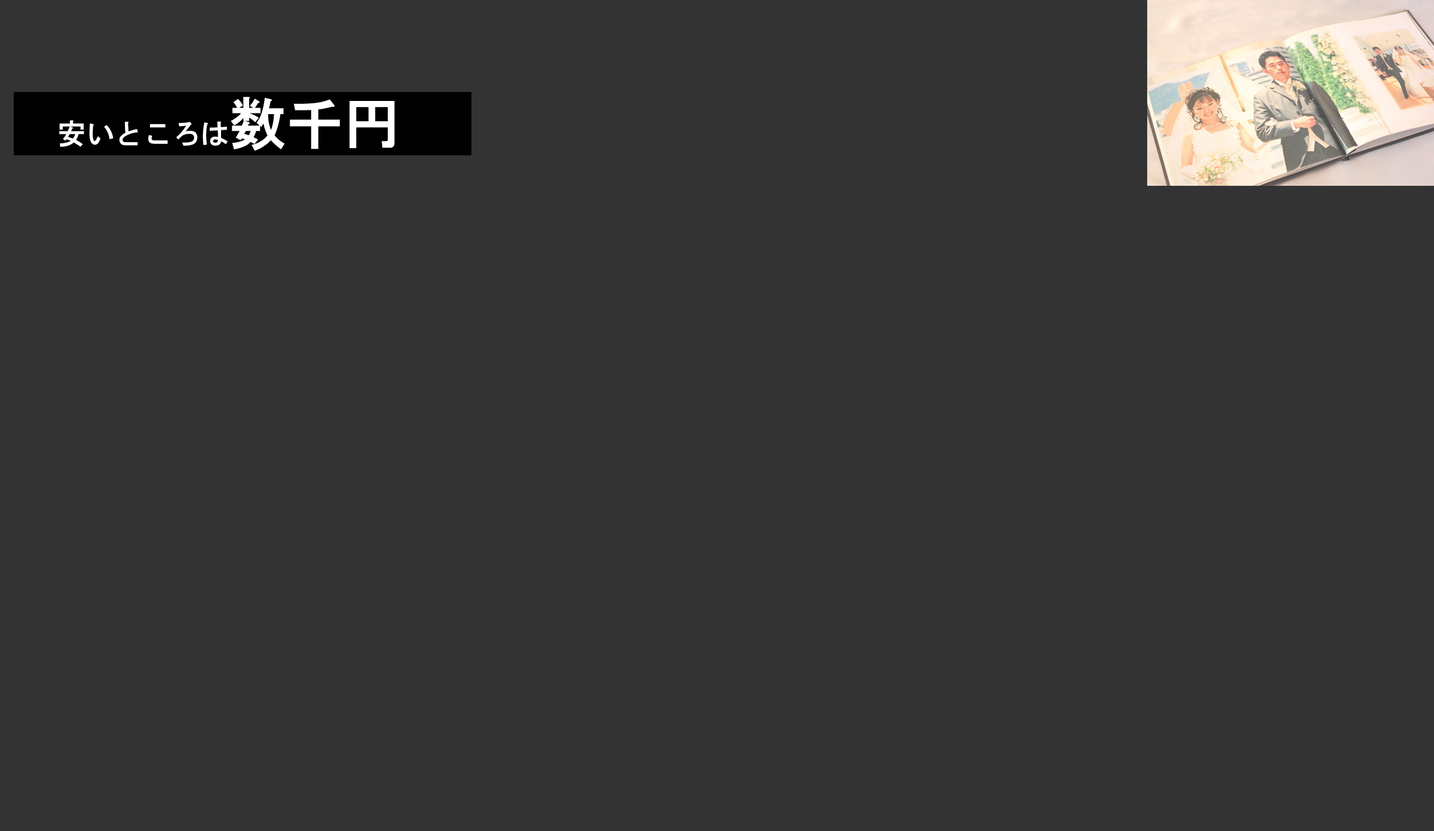
<style>
.page{position:relative;width:1434px;height:831px;background:#333333}
.page>*{position:absolute;margin:0}
.t1{font:28.6px "HGSGothicE";color:#ffffff}
.t2{font:57.2px "HGSGothicE";color:#ffffff}
</style>
<div class="page">
<p class="t1" style="left:59px;top:97px;width:336px;height:54px">安いところは<span class="t2">数千円</span></p>
</div>
